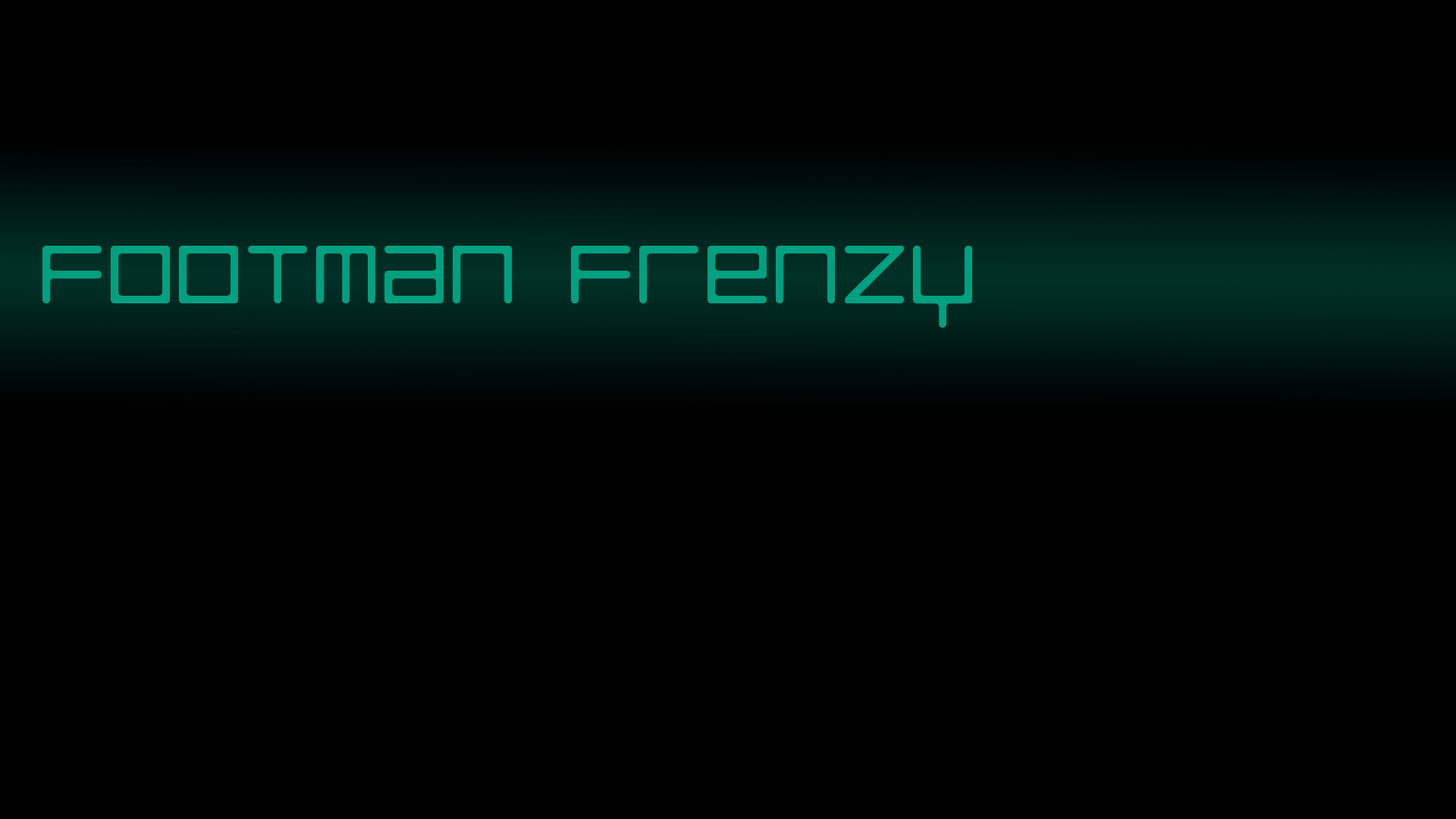
<style>
.page{position:relative;width:1456px;height:819px;background:#000000}
.page>*{position:absolute;margin:0}
.t1{font:106.2px "LuggageRoundLight";color:#01a080}
</style>
<div class="page">
<p class="t1" style="left:42px;top:246px;width:930px;height:82px">Footman Frenzy</p>
</div>
